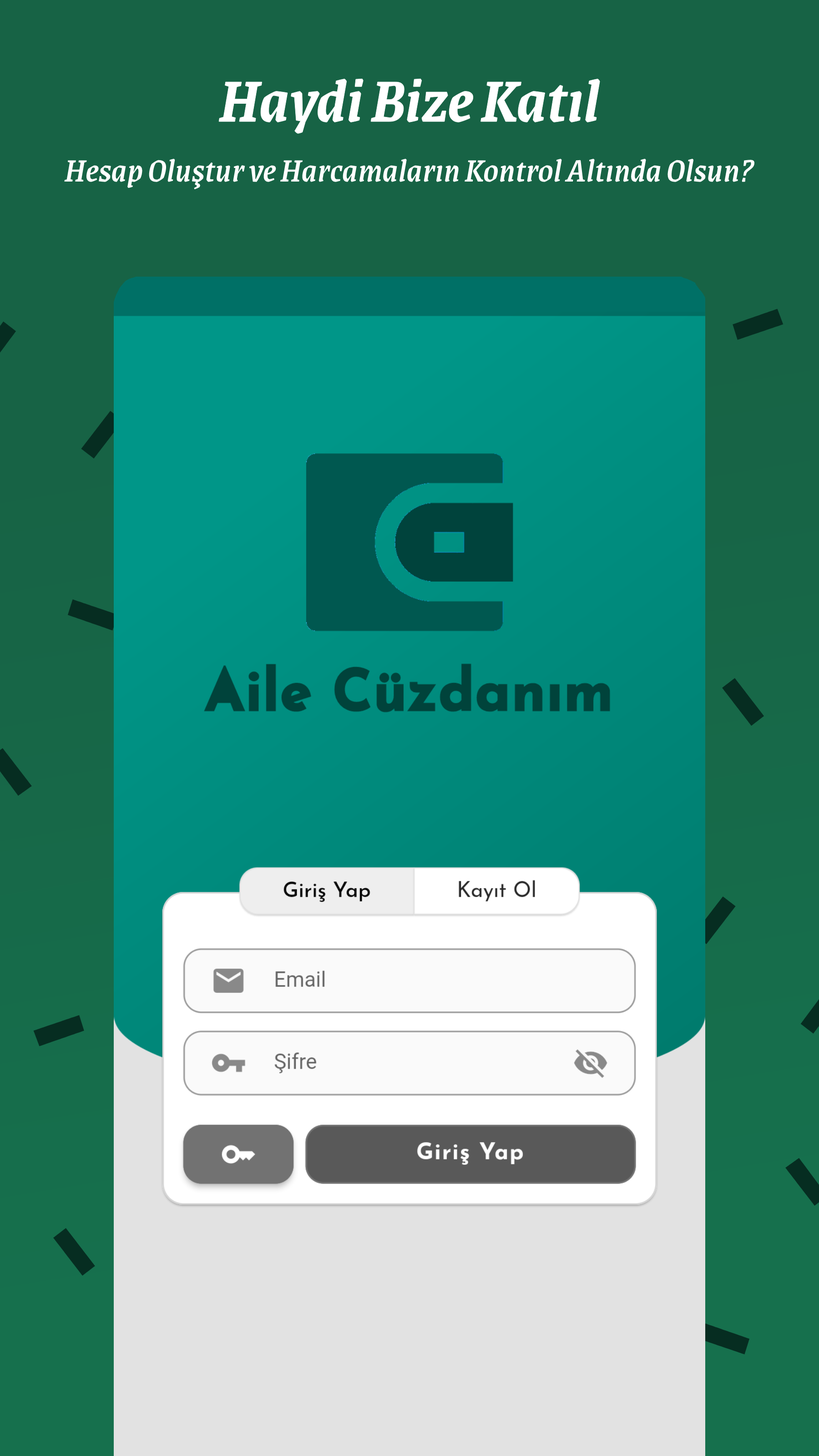
<style>
.page{position:relative;width:819px;height:1456px}
.page>*{position:absolute;margin:0}
.t1{font:65.1px "Grenze-SemiBoldItalic";color:#ffffff}
.t2{font:35px "Grenze-MediumItalic";color:#ffffff}
</style>
<div class="page">
<p class="t1" style="left:218px;top:78px;width:383px;height:56px">Haydi Bize Katıl</p>
<p class="t2" style="left:64px;top:159px;width:691px;height:31px">Hesap Oluştur ve Harcamaların Kontrol Altında Olsun?</p>
</div>
